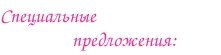
<style>
.page{position:relative;width:221px;height:55px;background:#ffffff}
.page>*{position:absolute;margin:0}
.t1{font:20px "ZapfChanceryCTT";color:#f22c95}
</style>
<div class="page">
<p class="t1" style="left:1px;top:10px;width:176px;height:41px">Специальные <br>  предложения:</p>
</div>
